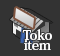
<style>
.page{position:relative;width:60px;height:56px;background:#333333}
.page>*{position:absolute;margin:0}
.t1{font:14px/10px "HeiseiMinStd-W7";color:#ffffff}
</style>
<div class="page">
<p class="t1" style="left:22px;top:29px;width:30px;height:21px;text-align:center">Toko<br>item</p>
</div>
